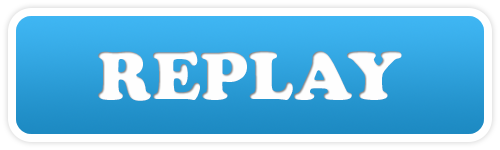
<style>
.page{position:relative;width:500px;height:150px}
.page>*{position:absolute;margin:0}
.t1{font:70.3px "CooperBlack";color:#fefefe}
</style>
<div class="page">
<p class="t1" style="left:98px;top:50px;width:304px;height:51px">REPLAY</p>
</div>
